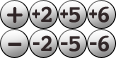
<style>
.page{position:relative;width:116px;height:58px}
.page>*{position:absolute;margin:0}
.t1{font:14.1px "Courier-Bold";letter-spacing:-0.08em;color:#302627}
.t2{font:24.1px "Courier-Bold";letter-spacing:-0.08em;color:#302627}
.t3{font:29.1px "Courier-Bold";color:#302627}
.t4{font:24.1px "Courier-Bold";letter-spacing:-0.08em;color:#302627;scale:0.6 1}
</style>
<div class="page">
<p class="t1" style="left:32px;top:6px;width:20px;height:16px">+<span class="t2">2</span></p>
<p class="t1" style="left:89px;top:6px;width:20px;height:17px">+<span class="t2">6</span></p>
<p class="t3" style="left:7px;top:7px;width:16px;height:16px">+</p>
<p class="t1" style="left:32px;top:9px;width:8px;height:9px">+</p>
<p class="t1" style="left:32px;top:10px;width:8px;height:9px">+</p>
<p class="t1" style="left:60px;top:9px;width:8px;height:9px">+</p>
<p class="t1" style="left:60px;top:7px;width:20px;height:16px">+<span class="t2">5</span></p>
<p class="t1" style="left:60px;top:10px;width:8px;height:9px">+</p>
<p class="t1" style="left:89px;top:9px;width:8px;height:9px">+</p>
<p class="t1" style="left:89px;top:10px;width:8px;height:9px">+</p>
<p class="t4" style="left:33px;top:35px;width:19px;height:16px">-<span class="t2">2</span></p>
<p class="t4" style="left:61px;top:36px;width:19px;height:16px">-<span class="t2">5</span></p>
<p class="t4" style="left:90px;top:35px;width:19px;height:17px">-<span class="t2">6</span></p>
<p class="t3" style="left:8px;top:42px;width:14px;height:4px">-</p>
</div>
